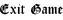
<style>
.page{position:relative;width:63px;height:20px;background:#ffffff}
.page>*{position:absolute;margin:0}
.t1{font:15px "CloisterBlack-Light";color:#000000}
</style>
<div class="page">
<p class="t1" style="left:0px;top:3px;width:63px;height:12px">Exit Game</p>
</div>
